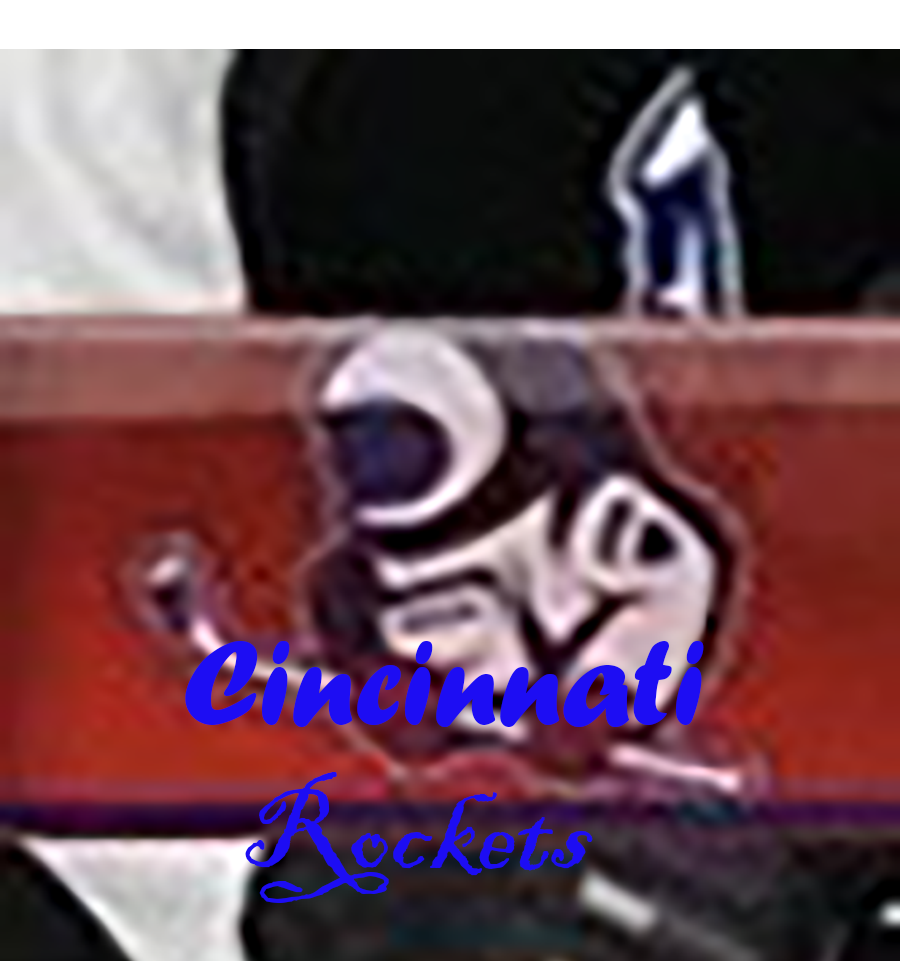
<style>
.page{position:relative;width:900px;height:961px}
.page>*{position:absolute;margin:0}
.t1{font:125px "ForteMT";color:#1d0df3}
.t2{font:125px "BlackadderITC-Regular";color:#1d0df3}
</style>
<div class="page">
<p class="t1" style="left:185px;top:641px;width:519px;height:86px">Cincinnati</p>
<p class="t2" style="left:245px;top:772px;width:348px;height:131px">Rockets</p>
</div>
